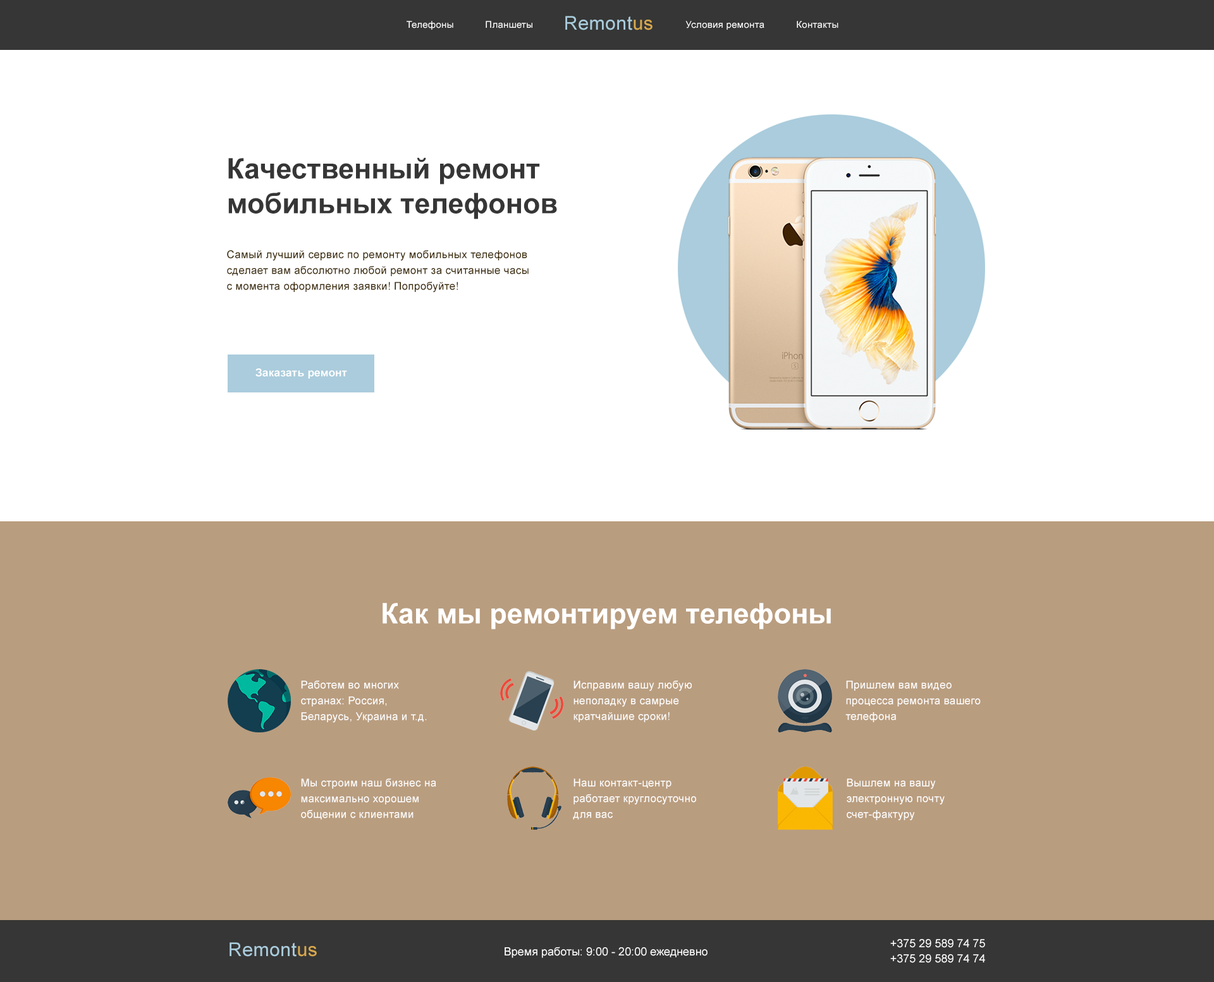
<style>
.page{position:relative;width:1214px;height:982px;background:#ffffff}
.page>*{position:absolute;margin:0}
.t1{font:19px "ArialMT";letter-spacing:0.02em;color:#aaccdc}
.t2{font:19px "ArialMT";letter-spacing:0.02em;color:#d7a84d}
.t3{font:9.5px "ArialMT";letter-spacing:0.02em;color:#ffffff}
.t4{font:28.4px/34.8px "Arial-BoldMT";color:#363636}
.t5{font:10.7px/15.8px "ArialMT";letter-spacing:0.02em;color:#392703}
.t6{font:10.7px "Arial-BoldMT";letter-spacing:0.02em;color:#ffffff}
.t7{font:28.4px "Arial-BoldMT";color:#ffffff}
.t8{font:10.7px/15.8px "ArialMT";letter-spacing:0.02em;color:#ffffff}
.t9{font:10.7px/15.7px "ArialMT";letter-spacing:0.02em;color:#ffffff}
.t10{font:11.4px "ArialMT";color:#ffffff}
</style>
<div class="page">
<p class="t1" style="left:565px;top:16px;width:87px;height:14px">Remont<span class="t2">us</span></p>
<p class="t3" style="left:406px;top:21px;width:47px;height:9px">Телефоны</p>
<p class="t3" style="left:486px;top:21px;width:46px;height:7px">Планшеты</p>
<p class="t3" style="left:685px;top:21px;width:79px;height:9px">Условия ремонта</p>
<p class="t3" style="left:797px;top:21px;width:41px;height:7px">Контакты</p>
<p class="t4" style="left:228px;top:157px;width:329px;height:62px">Качественный ремонт <br>мобильных телефонов</p>
<p class="t5" style="left:227px;top:250px;width:302px;height:43px">Самый лучший сервис по ремонту мобильных телефонов сделает вам абсолютно любой ремонт за считанные часы с момента оформления заявки! Попробуйте!</p>
<p class="t6" style="left:255px;top:369px;width:92px;height:10px">Заказать ремонт</p>
<p class="t7" style="left:382px;top:603px;width:449px;height:27px">Как мы ремонтируем телефоны</p>
<p class="t8" style="left:301px;top:681px;width:126px;height:42px">Работем во многих странах: Россия, Беларусь, Украина и т.д.</p>
<p class="t8" style="left:573px;top:681px;width:119px;height:42px">Исправим вашу любую неполадку в самрые кратчайшие сроки!</p>
<p class="t8" style="left:845px;top:681px;width:136px;height:42px">Пришлем вам видео процесса ремонта вашего телефона</p>
<p class="t8" style="left:301px;top:779px;width:135px;height:41px">Мы строим наш бизнес на максимально хорошем общении с клиентами</p>
<p class="t9" style="left:573px;top:779px;width:123px;height:41px">Наш контакт-центр работает круглосуточно для вас</p>
<p class="t9" style="left:846px;top:779px;width:98px;height:42px">Вышлем на вашу электронную почту счет-фактуру</p>
<p class="t10" style="left:890px;top:939px;width:95px;height:9px">+375 29 589 74 75</p>
<p class="t1" style="left:229px;top:943px;width:88px;height:14px">Remont<span class="t2">us</span></p>
<p class="t10" style="left:504px;top:947px;width:203px;height:11px">Время работы: 9:00 - 20:00 ежедневно</p>
<p class="t10" style="left:890px;top:955px;width:95px;height:8px">+375 29 589 74 74</p>
</div>
